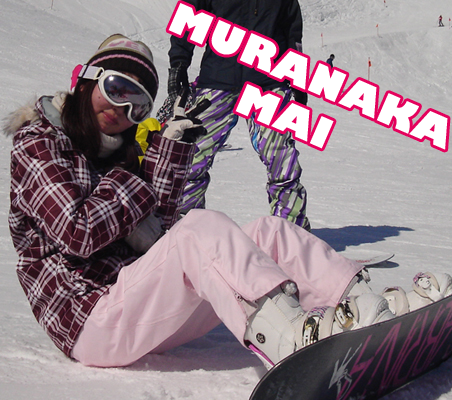
<style>
.page{position:relative;width:452px;height:400px}
.page>*{position:absolute;margin:0}
.t1{font:39.9px/47.8px "GillSans-UltraBold";color:#ffffff}
</style>
<div class="page">
<p class="t1" style="left:168px;top:3px;width:280px;height:147px;rotate:23deg">MURANAKA<br>       MAI</p>
</div>
